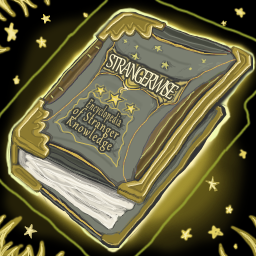
<style>
.page{position:relative;width:256px;height:256px}
.page>*{position:absolute;margin:0}
.t1{font:25px "Gabriola";letter-spacing:-0.1em;color:#fff8ce;scale:0.76 1}
.t2{font:16.7px/12.5px "Gabriola";letter-spacing:0.1em;color:#decd88;scale:0.7 1}
.t3{font:16.7px/12.5px "Gabriola";letter-spacing:0.1em;color:#decd88;scale:0.5 1}
</style>
<div class="page">
<p class="t1" style="left:106px;top:54px;width:74px;height:46px;rotate:27deg">STRANGERWISE</p>
<p class="t2" style="left:66px;top:99px;width:56px;height:52px;text-align:center;rotate:32deg"><span class="t3">  Encyclopedia<br></span>of Stranger<br>Knowledge</p>
</div>
